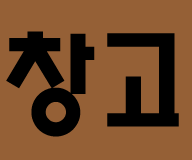
<style>
.page{position:relative;width:192px;height:160px;background:#956036}
.page>*{position:absolute;margin:0}
.t1{font:112.3px "HaanYHeadM";color:#000000}
</style>
<div class="page">
<p class="t1" style="left:6px;top:31px;width:173px;height:106px">창고</p>
</div>
